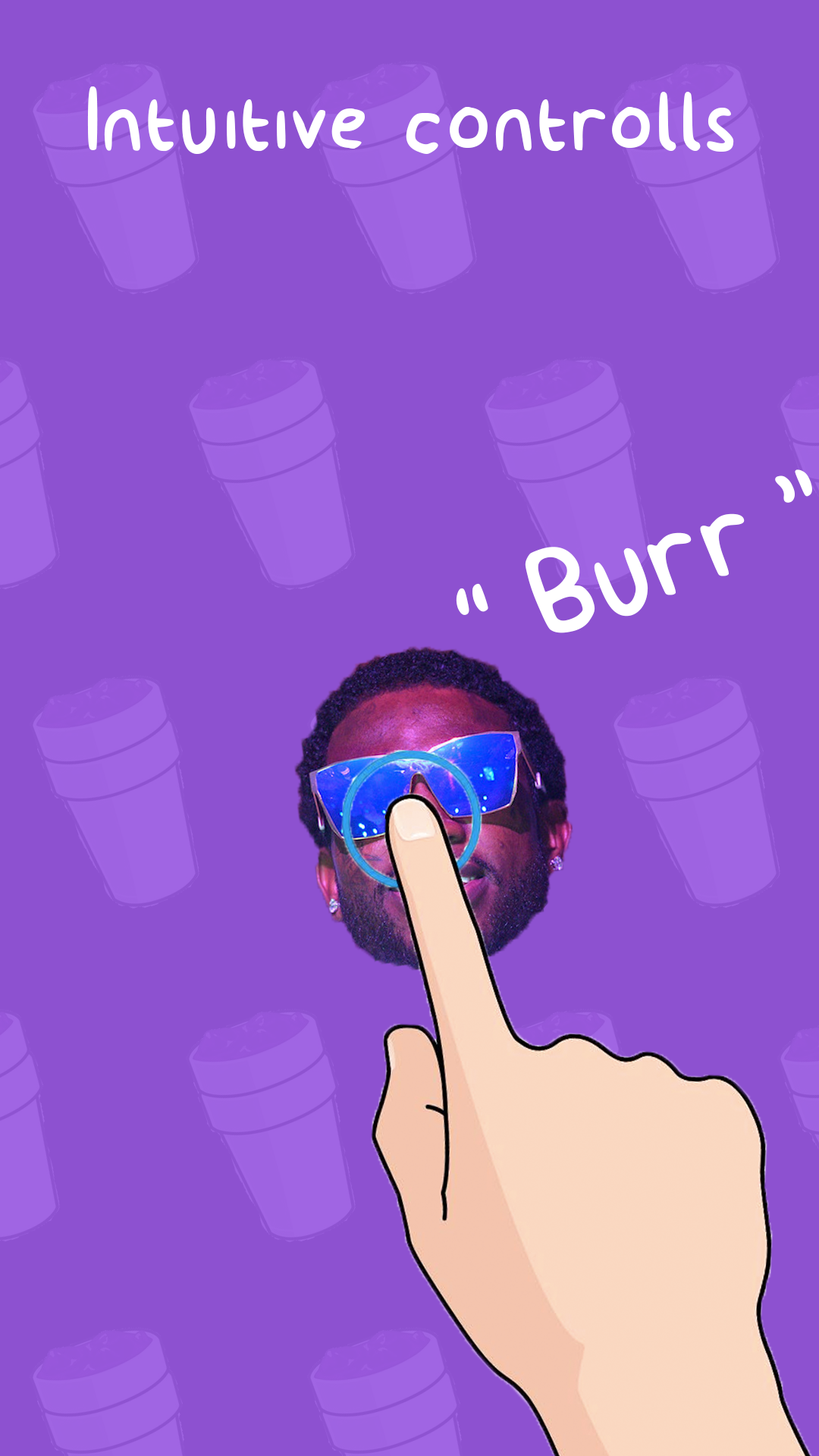
<style>
.page{position:relative;width:819px;height:1456px;background:#8d51d0}
.page>*{position:absolute;margin:0}
.t1{font:133.1px "billy";color:#ffffff}
.t2{font:186.8px "billy";color:#ffffff}
</style>
<div class="page">
<p class="t1" style="left:87px;top:86px;width:647px;height:68px">Intuitive controlls</p>
<p class="t2" style="left:456px;top:469px;width:356px;height:164px;rotate:-20deg">“Burr”</p>
</div>
